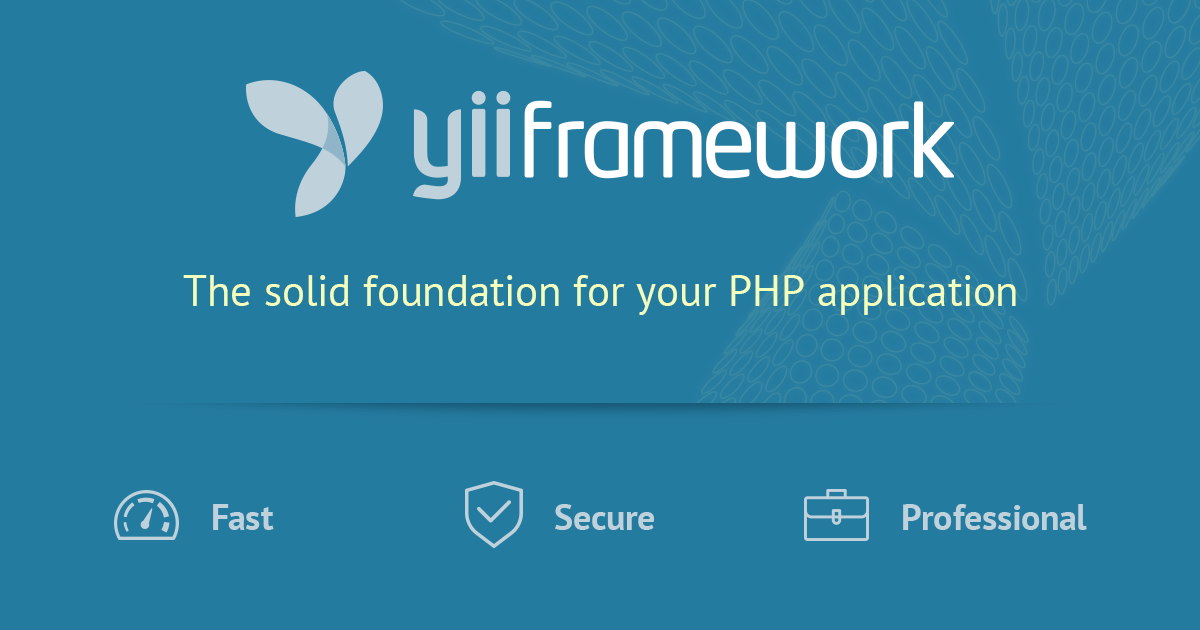
<style>
.page{position:relative;width:1200px;height:630px;background:#247ba0}
.page>*{position:absolute;margin:0}
.t1{font:43.5px "PTSans-Regular";color:#f3ffbd}
.t2{font:36px "PTSans-Bold";color:#bfd1da}
</style>
<div class="page">
<p class="t1" style="left:183px;top:275px;width:833px;height:40px">The solid foundation for your PHP application</p>
<p class="t2" style="left:213px;top:504px;width:61px;height:26px">Fast</p>
<p class="t2" style="left:555px;top:504px;width:99px;height:26px">Secure</p>
<p class="t2" style="left:903px;top:504px;width:184px;height:26px">Professional</p>
</div>
